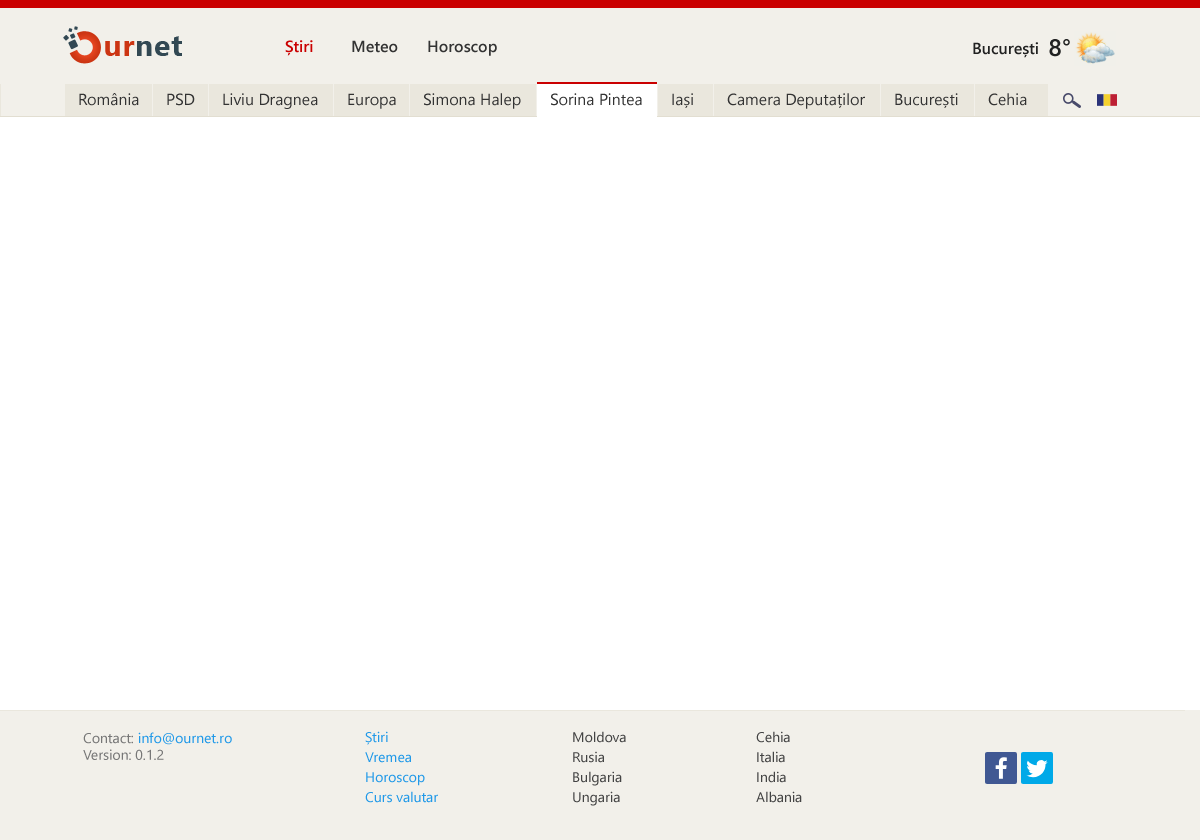
<style>
.page{position:relative;width:1200px;height:840px;background:#ffffff}
.page>*{position:absolute;margin:0}
.t1{font:30px "SegoeUI-Bold";letter-spacing:0.025em;color:#324853}
.t2{font:30px "SegoeUI-Bold";letter-spacing:0.025em;color:#cc3513}
.t3{font:16px "SegoeUI-Semibold";color:#ca0000}
.t4{font:16px "SegoeUI-Semibold";color:#333333}
.t5{font:24px "SegoeUI-Semibold";color:#222222}
.t6{font:16px "SegoeUI-Semibold";color:#222222}
.t7{font:16px "SegoeUI";color:#333333}
.t8{font:14px "SegoeUI";color:#2199e8}
.t9{font:14px "SegoeUI";color:#777777}
.t10{font:14px/20px "SegoeUI";color:#2199e8}
.t11{font:14px/20px "SegoeUI";color:#444444}
</style>
<div class="page">
<p class="t1" style="left:105px;top:36px;width:77px;height:20px"><span class="t2">ur</span>net</p>
<p class="t3" style="left:285px;top:40px;width:28px;height:16px">Știri</p>
<p class="t4" style="left:352px;top:40px;width:46px;height:13px">Meteo</p>
<p class="t4" style="left:428px;top:40px;width:69px;height:16px">Horoscop</p>
<p class="t5" style="left:1049px;top:39px;width:21px;height:18px">8°</p>
<p class="t6" style="left:973px;top:42px;width:65px;height:16px">București</p>
<p class="t7" style="left:79px;top:93px;width:60px;height:13px">România</p>
<p class="t7" style="left:167px;top:93px;width:28px;height:13px">PSD</p>
<p class="t7" style="left:223px;top:93px;width:95px;height:16px">Liviu Dragnea</p>
<p class="t7" style="left:348px;top:93px;width:48px;height:16px">Europa</p>
<p class="t7" style="left:424px;top:93px;width:97px;height:16px">Simona Halep</p>
<p class="t7" style="left:551px;top:93px;width:91px;height:13px">Sorina Pintea</p>
<p class="t7" style="left:672px;top:93px;width:21px;height:15px">Iași</p>
<p class="t7" style="left:727px;top:93px;width:138px;height:16px">Camera Deputaților</p>
<p class="t7" style="left:895px;top:93px;width:63px;height:15px">București</p>
<p class="t7" style="left:988px;top:93px;width:39px;height:13px">Cehia</p>
<p class="t8" style="left:83px;top:732px;width:149px;height:28px"><span class="t9">Contact: </span>info@ournet.ro<br><span class="t9">Version: 0.1.2</span></p>
<p class="t10" style="left:365px;top:731px;width:73px;height:72px">Știri<br>Vremea<br>Horoscop<br>Curs valutar</p>
<p class="t11" style="left:573px;top:731px;width:53px;height:75px">Moldova<br>Rusia<br>Bulgaria<br>Ungaria</p>
<p class="t11" style="left:756px;top:731px;width:46px;height:72px">Cehia<br>Italia<br>India<br>Albania</p>
</div>
